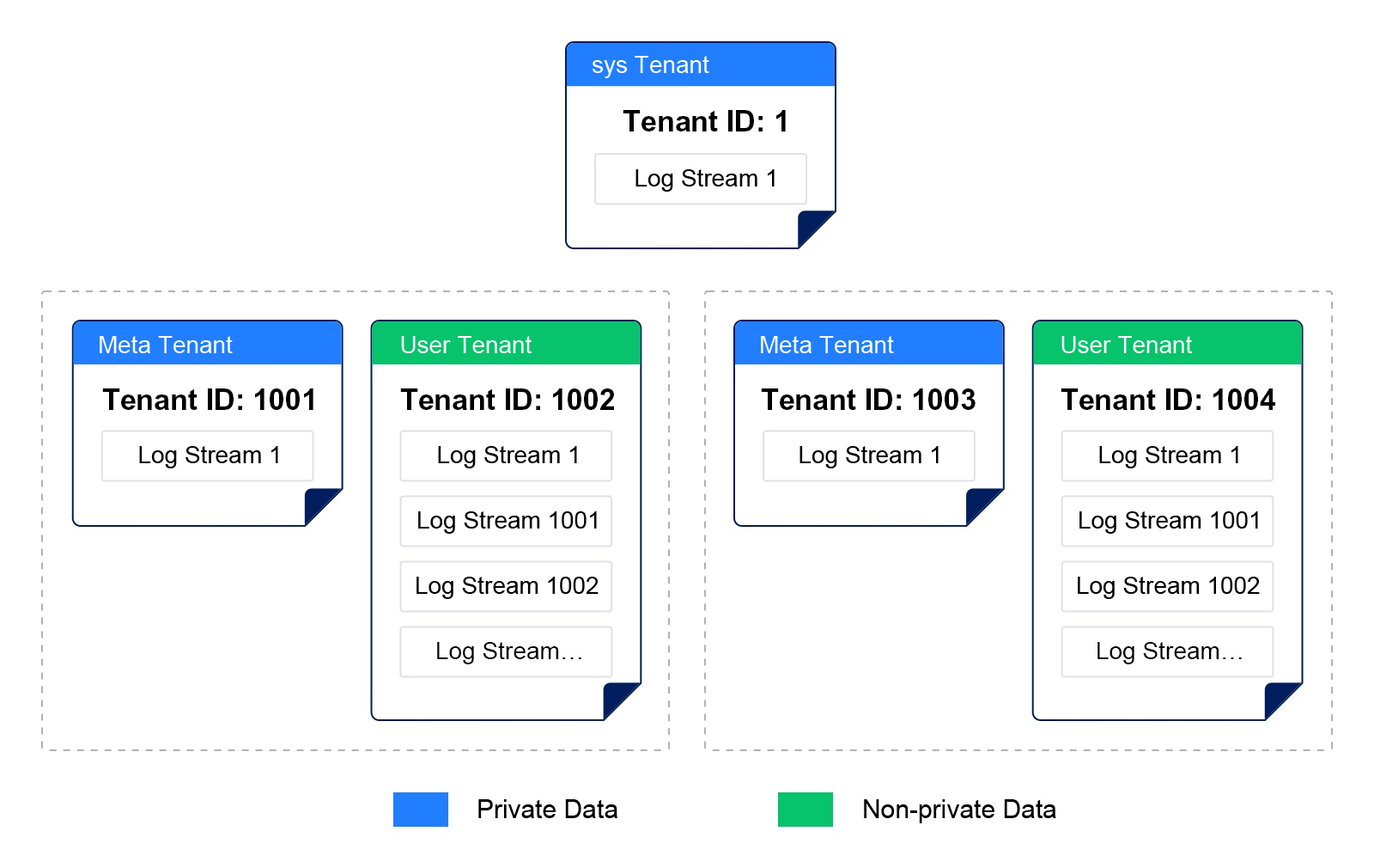
<style>
.page{position:relative;width:1374px;height:868px;background:#ffffff}
.page>*{position:absolute;margin:0}
.t1{font:24.1px "ArialMT";color:#ffffff}
.t2{font:29.2px "Arial-BoldMT";color:#000000}
.t3{font:24.1px "ArialMT";color:#000000}
.t4{font:25.8px "ArialMT";color:#000000}
</style>
<div class="page">
<p class="t1" style="left:592px;top:56px;width:118px;height:22px">sys Tenant</p>
<p class="t2" style="left:623px;top:110px;width:163px;height:21px">Tenant ID: 1</p>
<p class="t3" style="left:636px;top:169px;width:139px;height:23px">Log Stream 1</p>
<p class="t1" style="left:100px;top:336px;width:133px;height:17px">Meta Tenant</p>
<p class="t1" style="left:401px;top:336px;width:131px;height:17px">User Tenant</p>
<p class="t1" style="left:761px;top:336px;width:133px;height:17px">Meta Tenant</p>
<p class="t1" style="left:1062px;top:336px;width:130px;height:17px">User Tenant</p>
<p class="t2" style="left:102px;top:388px;width:212px;height:22px">Tenant ID: 1001</p>
<p class="t2" style="left:400px;top:388px;width:214px;height:22px">Tenant ID: 1002</p>
<p class="t2" style="left:761px;top:388px;width:215px;height:22px">Tenant ID: 1003</p>
<p class="t2" style="left:1061px;top:388px;width:215px;height:22px">Tenant ID: 1004</p>
<p class="t3" style="left:139px;top:446px;width:139px;height:22px">Log Stream 1</p>
<p class="t3" style="left:438px;top:446px;width:139px;height:22px">Log Stream 1</p>
<p class="t3" style="left:800px;top:446px;width:139px;height:22px">Log Stream 1</p>
<p class="t3" style="left:1100px;top:446px;width:139px;height:22px">Log Stream 1</p>
<p class="t3" style="left:418px;top:511px;width:179px;height:22px">Log Stream 1001</p>
<p class="t3" style="left:1080px;top:511px;width:178px;height:22px">Log Stream 1001</p>
<p class="t3" style="left:417px;top:576px;width:182px;height:23px">Log Stream 1002</p>
<p class="t3" style="left:1078px;top:576px;width:182px;height:23px">Log Stream 1002</p>
<p class="t3" style="left:437px;top:642px;width:145px;height:22px">Log Stream…</p>
<p class="t3" style="left:1098px;top:642px;width:144px;height:22px">Log Stream…</p>
<p class="t4" style="left:478px;top:799px;width:140px;height:19px">Private Data</p>
<p class="t4" style="left:864px;top:799px;width:193px;height:24px">Non-private Data</p>
</div>
